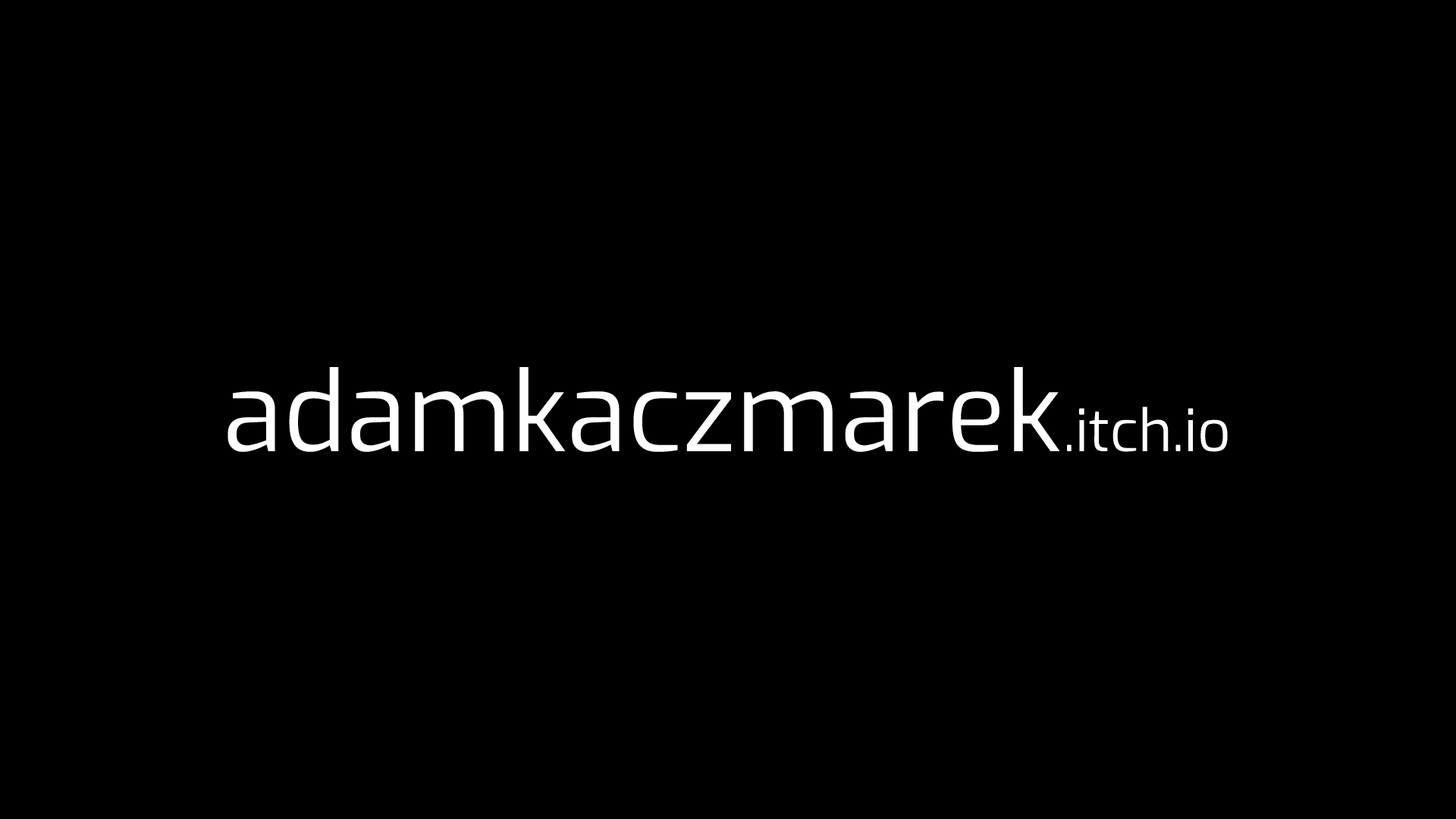
<style>
.page{position:relative;width:1456px;height:819px;background:#000000}
.page>*{position:absolute;margin:0}
.t1{font:110.3px "Exo-Regular";color:#ffffff}
.t2{font:58px "Exo-Regular";color:#ffffff}
</style>
<div class="page">
<p class="t1" style="left:227px;top:366px;width:833px;height:86px">adamkaczmarek</p>
<p class="t2" style="left:1067px;top:406px;width:161px;height:46px">.itch.io</p>
</div>
